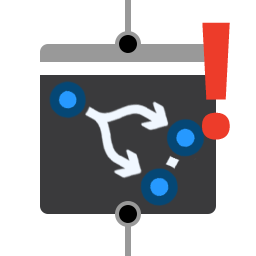
<style>
.page{position:relative;width:256px;height:256px;background:#ffffff}
.page>*{position:absolute;margin:0}
.t1{font:160.4px "OpenSans-Bold";color:#ed3c2a}
</style>
<div class="page">
<p class="t1" style="left:202px;top:22px;width:28px;height:118px">!</p>
</div>
